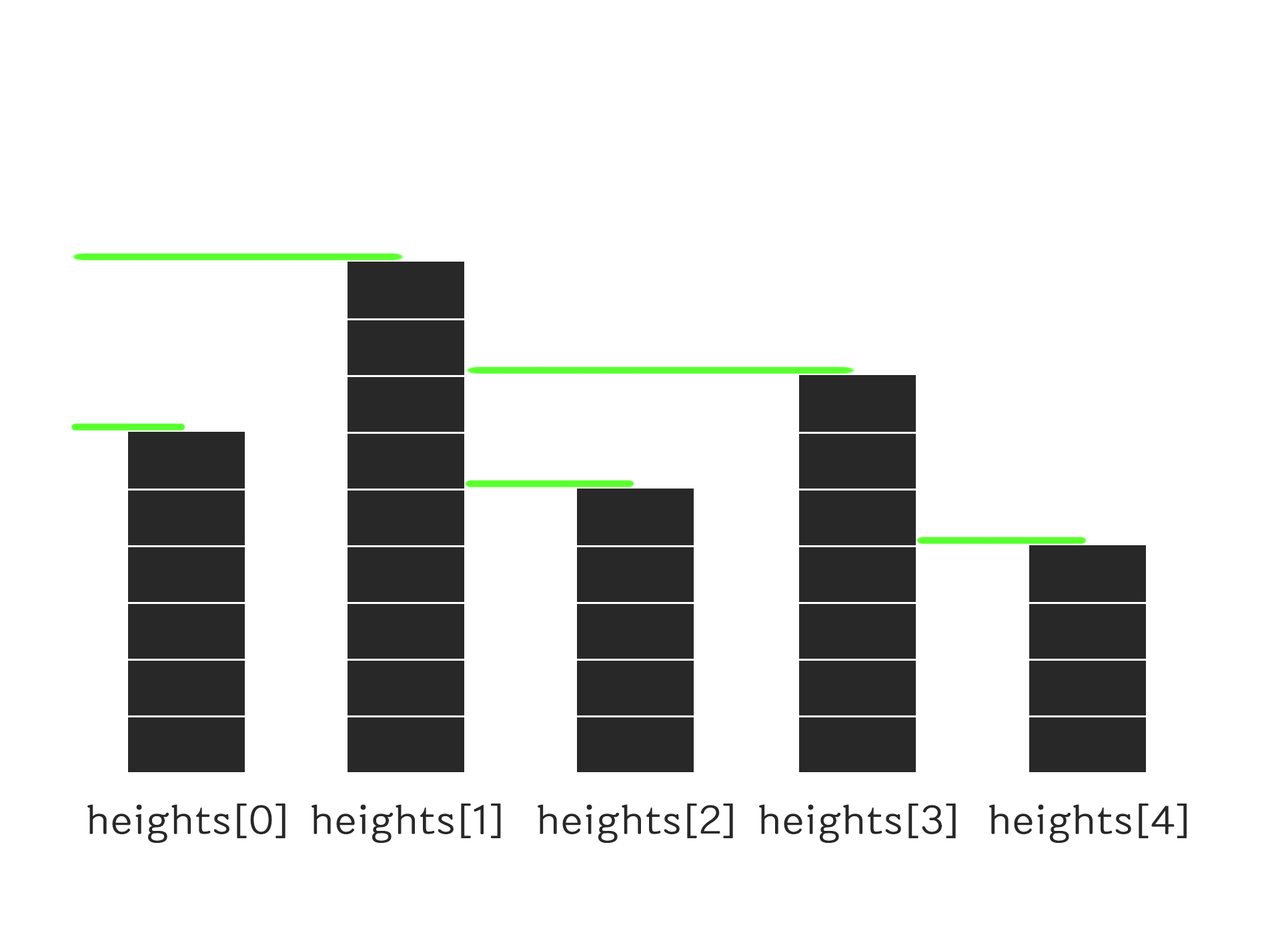
<style>
.page{position:relative;width:1262px;height:945px;background:#ffffff}
.page>*{position:absolute;margin:0}
.t1{font:36.4px "BinggraeII";letter-spacing:0.025em;color:#282828}
</style>
<div class="page">
<p class="t1" style="left:87px;top:803px;width:199px;height:40px">heights[0]</p>
<p class="t1" style="left:311px;top:803px;width:190px;height:40px">heights[1]</p>
<p class="t1" style="left:537px;top:803px;width:196px;height:40px">heights[2]</p>
<p class="t1" style="left:759px;top:803px;width:197px;height:40px">heights[3]</p>
<p class="t1" style="left:989px;top:803px;width:198px;height:40px">heights[4]</p>
</div>
